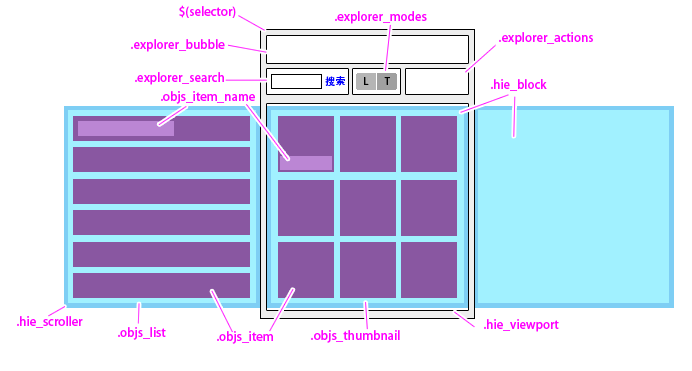
<style>
.page{position:relative;width:692px;height:371px;background:#ffffff}
.page>*{position:absolute;margin:0}
.t1{font:12px "AdobeHeitiStd-Regular";color:#ff00ff}
.t2{font:10px "AdobeHeitiStd-Regular";color:#0000ff}
.t3{font:10px "AdobeHeitiStd-Regular";color:#000000}
</style>
<div class="page">
<p class="t1" style="left:179px;top:5px;width:57px;height:13px">$(selector)</p>
<p class="t1" style="left:335px;top:11px;width:92px;height:13px">.explorer_modes</p>
<p class="t1" style="left:131px;top:39px;width:94px;height:13px">.explorer_bubble</p>
<p class="t1" style="left:499px;top:32px;width:94px;height:13px">.explorer_actions</p>
<p class="t1" style="left:135px;top:72px;width:89px;height:13px">.explorer_search</p>
<p class="t2" style="left:325px;top:76px;width:20px;height:10px">搜索</p>
<p class="t3" style="left:364px;top:77px;width:26px;height:8px">L       T</p>
<p class="t1" style="left:491px;top:79px;width:56px;height:12px">.hie_block</p>
<p class="t1" style="left:161px;top:91px;width:94px;height:13px">.objs_item_name</p>
<p class="t1" style="left:17px;top:316px;width:66px;height:12px">.hie_scroller</p>
<p class="t1" style="left:118px;top:327px;width:48px;height:13px">.objs_list</p>
<p class="t1" style="left:484px;top:319px;width:75px;height:13px">.hie_viewport</p>
<p class="t1" style="left:217px;top:331px;width:56px;height:13px">.objs_item</p>
<p class="t1" style="left:311px;top:330px;width:89px;height:13px">.objs_thumbnail</p>
</div>
